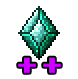
<style>
.page{position:relative;width:78px;height:79px;background:#ffffff}
.page>*{position:absolute;margin:0}
.t1{font:23.9px "PressStart2P-Regular";color:#cc00ff}
</style>
<div class="page">
<p class="t1" style="left:18px;top:57px;width:18px;height:16px">+</p>
<p class="t1" style="left:43px;top:57px;width:18px;height:16px">+</p>
</div>
